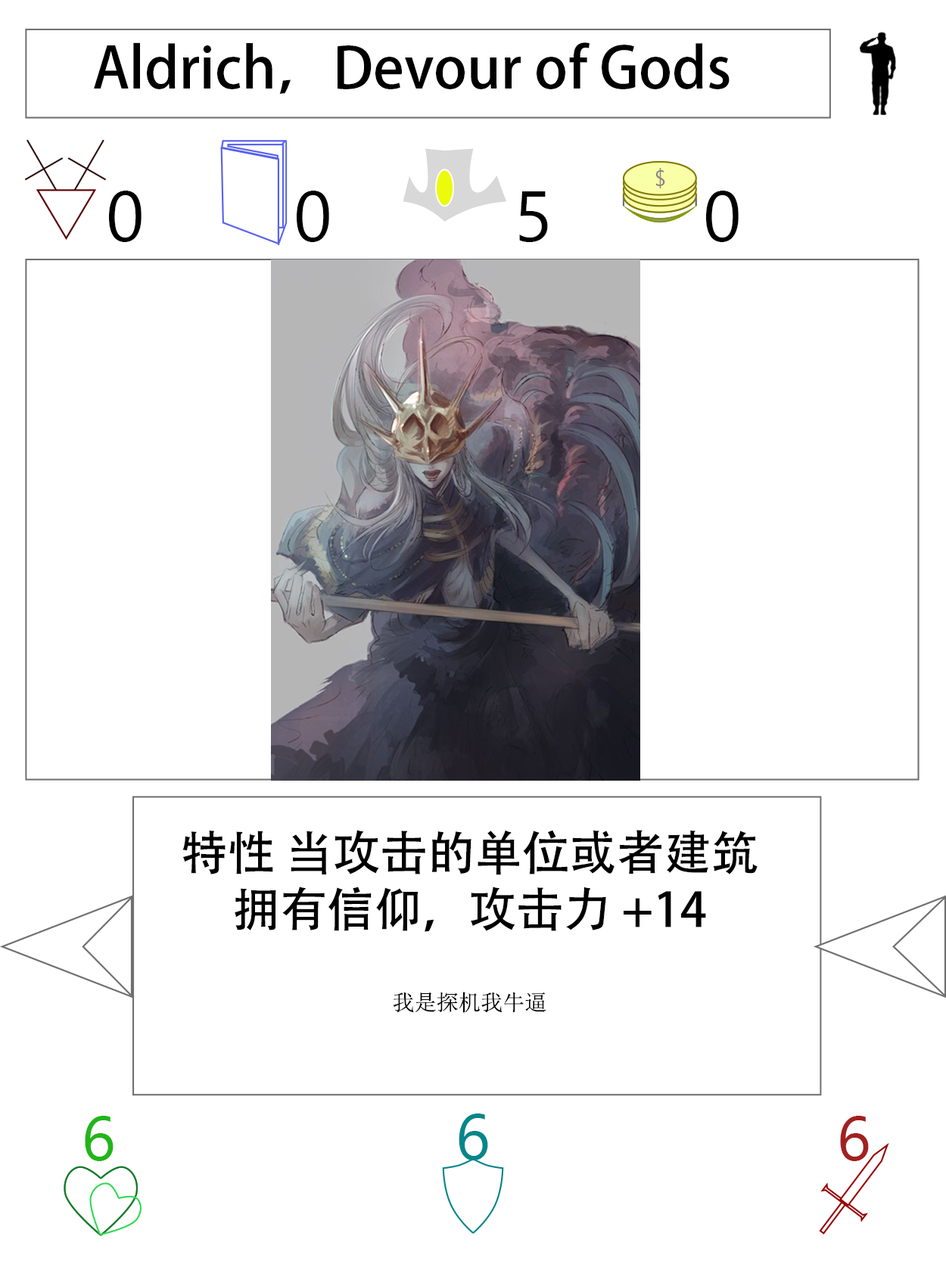
<style>
.page{position:relative;width:946px;height:1261px;background:#ffffff}
.page>*{position:absolute;margin:0}
.t1{font:56.7px "AdobeHeitiStd-Regular";color:#000000}
.t2{font:70.9px "SegoeUI";color:#000000}
.t3{font:47.3px "AdobeHeitiStd-Regular";color:#000000}
.t4{font:22.1px "NSimSun";color:#000000}
.t5{font:63px "SegoeUI";color:#22b518}
.t6{font:64.6px "SegoeUI";color:#05868a}
.t7{font:63px "SegoeUI";color:#a32020}
</style>
<div class="page">
<p class="t1" style="left:94px;top:42px;width:635px;height:52px">Aldrich，Devour of Gods</p>
<p class="t2" style="left:109px;top:191px;width:32px;height:51px">0</p>
<p class="t2" style="left:297px;top:191px;width:32px;height:51px">0</p>
<p class="t2" style="left:519px;top:191px;width:29px;height:51px">5</p>
<p class="t2" style="left:706px;top:191px;width:32px;height:51px">0</p>
<p class="t3" style="left:182px;top:830px;width:575px;height:183px;text-align:center">特性 当攻击的单位或者建筑拥有信仰，攻击力 +14<br><br><span class="t4">我是探机我牛逼</span></p>
<p class="t5" style="left:85px;top:1116px;width:28px;height:45px">6</p>
<p class="t6" style="left:458px;top:1114px;width:30px;height:46px">6</p>
<p class="t7" style="left:840px;top:1116px;width:28px;height:45px">6</p>
</div>
